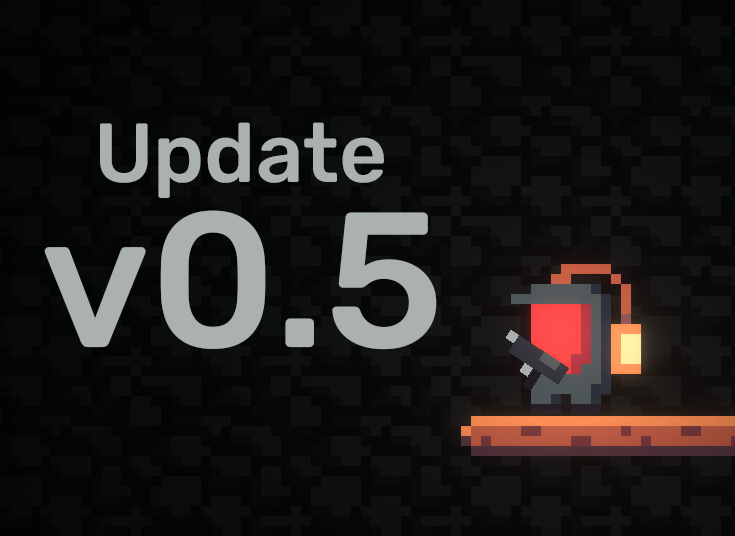
<style>
.page{position:relative;width:735px;height:536px}
.page>*{position:absolute;margin:0}
.t1{font:83.6px "Rubik-Medium";color:#abb1af}
.t2{font:192.1px "Rubik-Medium";color:#abb1af}
</style>
<div class="page">
<p class="t1" style="left:100px;top:122px;width:284px;height:76px">Update</p>
<p class="t2" style="left:44px;top:210px;width:393px;height:140px">v0.5</p>
</div>
